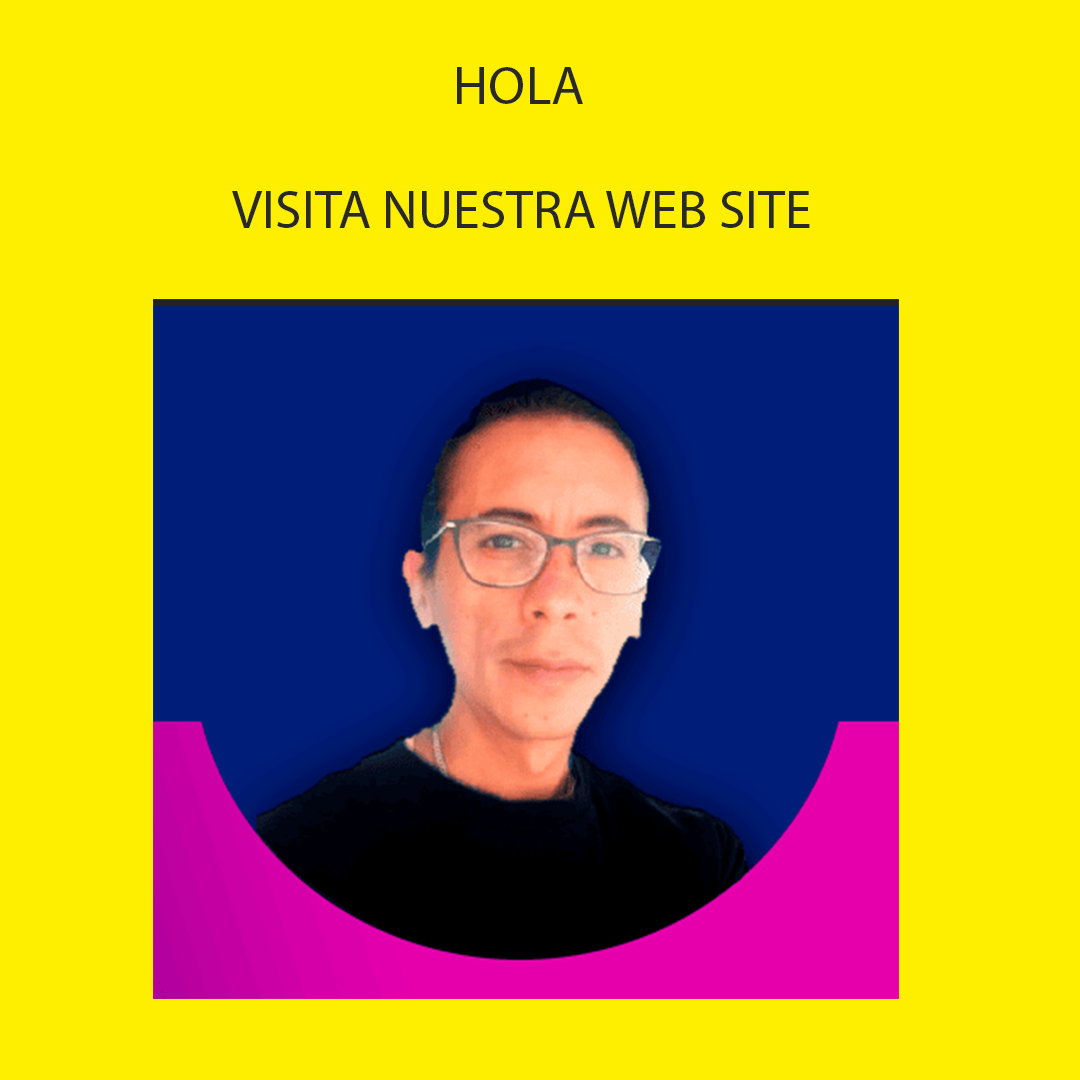
<style>
.page{position:relative;width:1080px;height:1080px;background:#feee00}
.page>*{position:absolute;margin:0}
.t1{font:54.2px "MyriadPro-Regular";color:#292929}
</style>
<div class="page">
<p class="t1" style="left:457px;top:67px;width:126px;height:37px">HOLA</p>
<p class="t1" style="left:232px;top:191px;width:578px;height:37px">VISITA NUESTRA WEB SITE</p>
</div>
